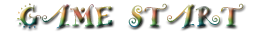
<style>
.page{position:relative;width:256px;height:32px;background:#ffffff}
.page>*{position:absolute;margin:0}
.t1{font:30px "ARHERMANN"}
</style>
<div class="page">
<p class="t1" style="left:17px;top:3px;width:227px;height:26px">GAME START</p>
</div>
